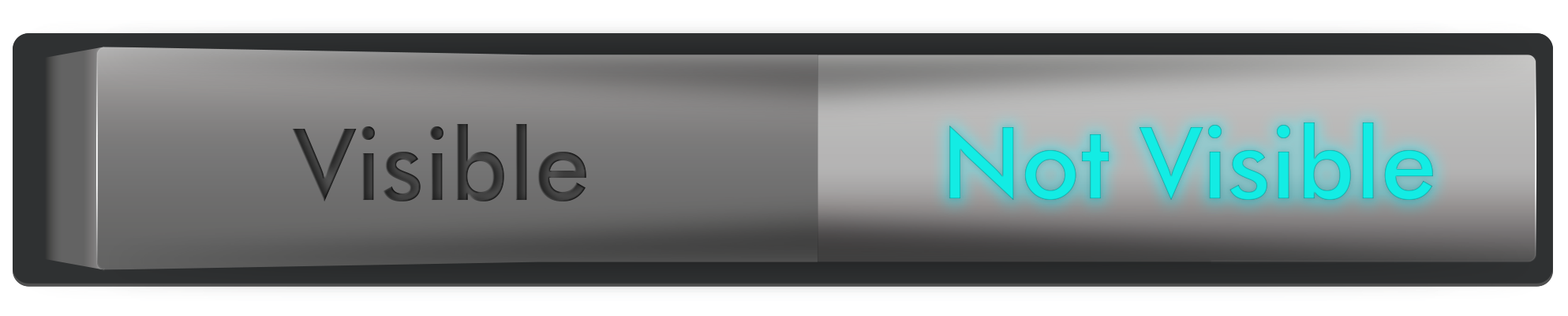
<style>
.page{position:relative;width:1568px;height:316px}
.page>*{position:absolute;margin:0}
.t1{font:99.7px "FuturaBT-Medium";color:#383838}
.t2{font:99.7px "FuturaBT-Medium";color:#13ece4}
</style>
<div class="page">
<p class="t1" style="left:292px;top:124px;width:294px;height:77px">Visible</p>
<p class="t2" style="left:949px;top:122px;width:484px;height:78px">Not Visible</p>
</div>
